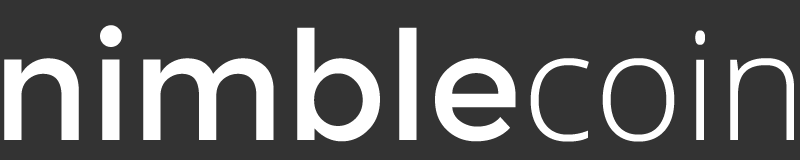
<style>
.page{position:relative;width:800px;height:160px;background:#333333}
.page>*{position:absolute;margin:0}
.t1{font:151.1px "Montserrat-Regular";color:#ffffff}
.t2{font:151.1px "OpenSans-Light";color:#ffffff}
</style>
<div class="page">
<p class="t1" style="left:4px;top:25px;width:790px;height:117px">nimble<span class="t2">coin</span></p>
</div>
